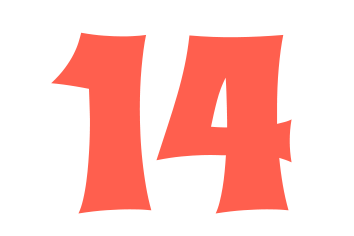
<style>
.page{position:relative;width:354px;height:236px;background:#ffffff}
.page>*{position:absolute;margin:0}
.t1{font:250px "SpicyRice-Regular";color:#ff5f4e}
</style>
<div class="page">
<p class="t1" style="left:51px;top:32px;width:241px;height:182px">14</p>
</div>
